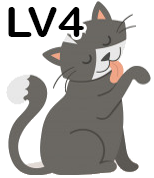
<style>
.page{position:relative;width:154px;height:178px;background:#ffffff}
.page>*{position:absolute;margin:0}
.t1{font:41.9px "ArialRoundedMTBold";color:#000000;scale:1.06 1}
</style>
<div class="page">
<p class="t1" style="left:8px;top:7px;width:76px;height:30px">LV4</p>
</div>
